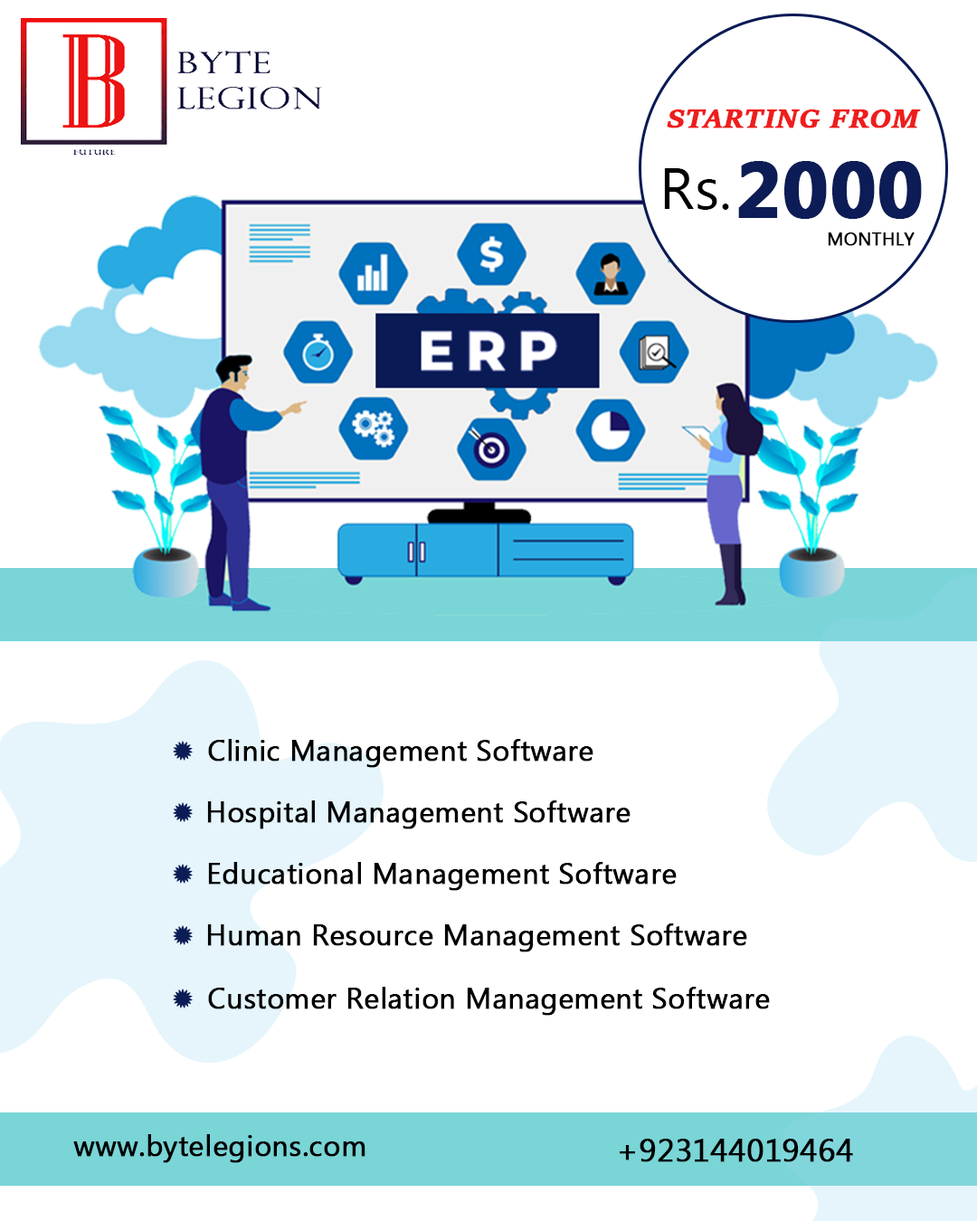
<style>
.page{position:relative;width:977px;height:1221px;background:#ffffff}
.page>*{position:absolute;margin:0}
.t1{font:28.9px "SitkaText-BoldItalic";color:#ef1d1d;font-weight:bold}
.t2{font:78.7px "MyanmarText-Bold";color:#0c1c56;font-weight:bold}
.t3{font:58.2px "MyanmarText";color:#000000;text-transform:uppercase}
.t4{font:58.2px "MyanmarText";color:#000000}
.t5{font:18.1px "MyanmarText";color:#000000;text-transform:uppercase;font-weight:bold}
.t6{font:28.9px "MyanmarText";color:#000000;font-weight:bold}
.t7{font:31.7px "MyanmarText";color:#000000;font-weight:bold}
</style>
<div class="page">
<p class="t1" style="left:667px;top:109px;width:254px;height:19px">STARTING FROM</p>
<p class="t2" style="left:738px;top:161px;width:184px;height:58px">2000</p>
<p class="t3" style="left:664px;top:168px;width:65px;height:42px">r<span class="t4">s</span>.</p>
<p class="t5" style="left:827px;top:232px;width:87px;height:14px">MONTHLY</p>
<p class="t6" style="left:208px;top:739px;width:385px;height:29px">Clinic Management Software</p>
<p class="t6" style="left:207px;top:800px;width:423px;height:29px">Hospital Management Software</p>
<p class="t6" style="left:208px;top:862px;width:468px;height:29px">Educational Management Software</p>
<p class="t6" style="left:207px;top:923px;width:540px;height:29px">Human Resource Management Software</p>
<p class="t6" style="left:208px;top:987px;width:562px;height:29px">Customer Relation Management Software</p>
<p class="t6" style="left:73px;top:1134px;width:292px;height:29px">www.bytelegions.com</p>
<p class="t7" style="left:619px;top:1139px;width:234px;height:23px">+923144019464</p>
</div>
